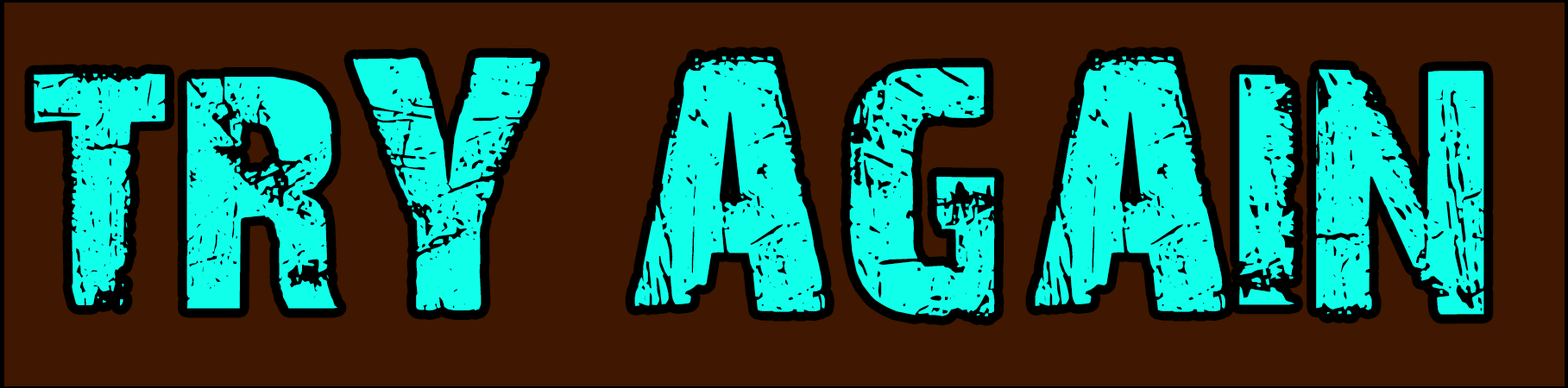
<style>
.page{position:relative;width:1568px;height:388px;background:#401700}
.page>*{position:absolute;margin:0}
.t1{font:331.1px "28DaysLaterCyr";color:#10ffeb}
</style>
<div class="page">
<p class="t1" style="left:34px;top:56px;width:1450px;height:261px">TRY AGAIN</p>
</div>
